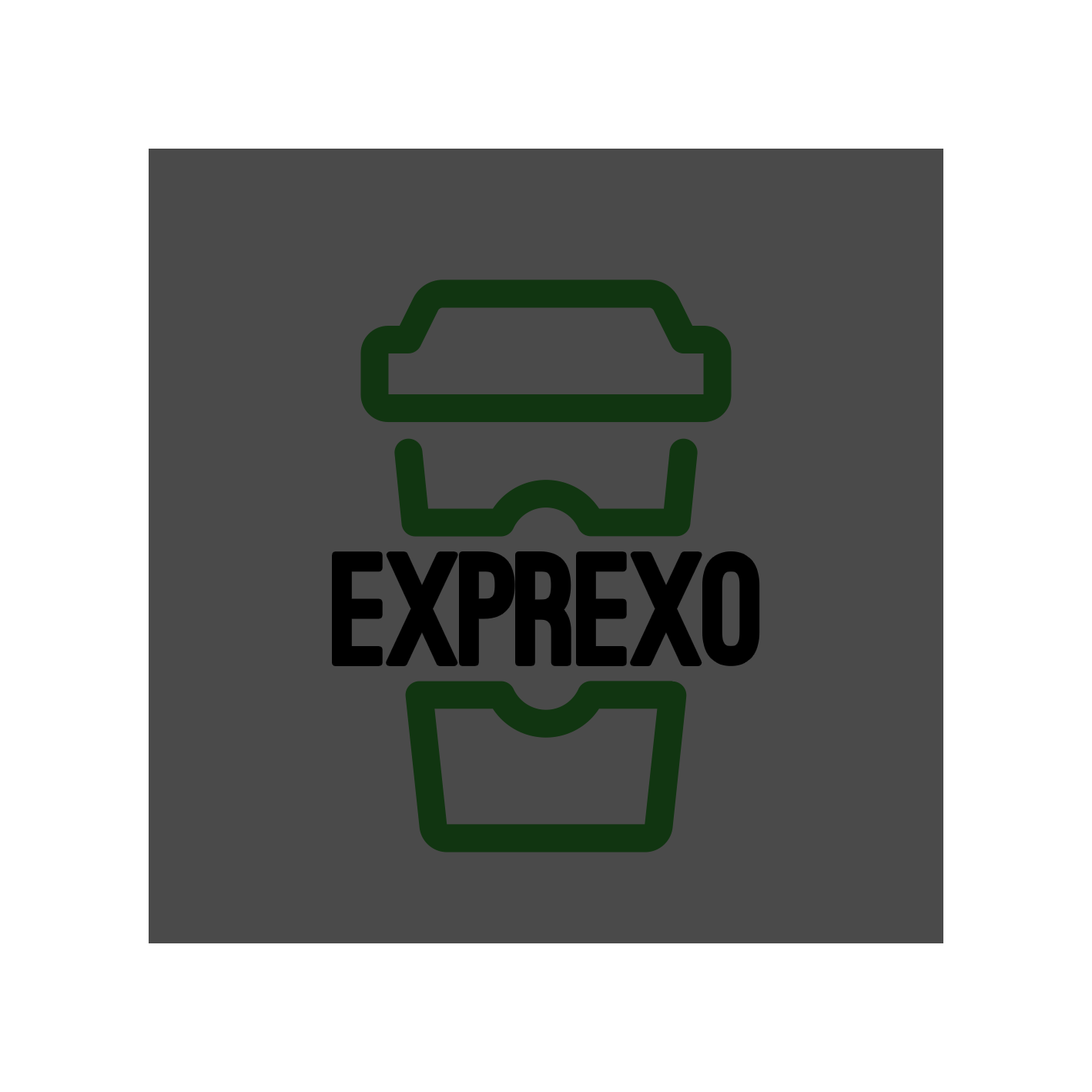
<style>
.page{position:relative;width:1092px;height:1092px;background:#ffffff}
.page>*{position:absolute;margin:0}
.t1{font:147px "OstrichSans-Black";color:#000000}
</style>
<div class="page">
<p class="t1" style="left:335px;top:554px;width:422px;height:109px">exprexo</p>
</div>
